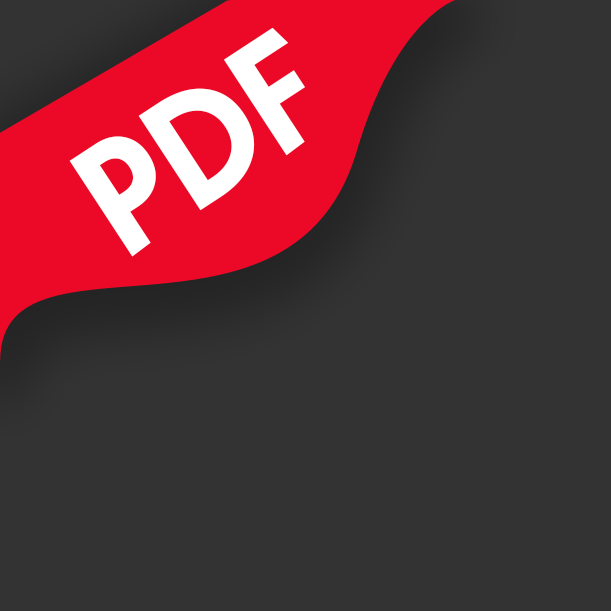
<style>
.page{position:relative;width:611px;height:611px;background:#333333}
.page>*{position:absolute;margin:0}
.t1{font:163.3px "KabelITCbyBT-Demi";color:#ffffff}
</style>
<div class="page">
<p class="t1" style="left:69px;top:27px;width:236px;height:230px;rotate:-33deg">PDF</p>
</div>
